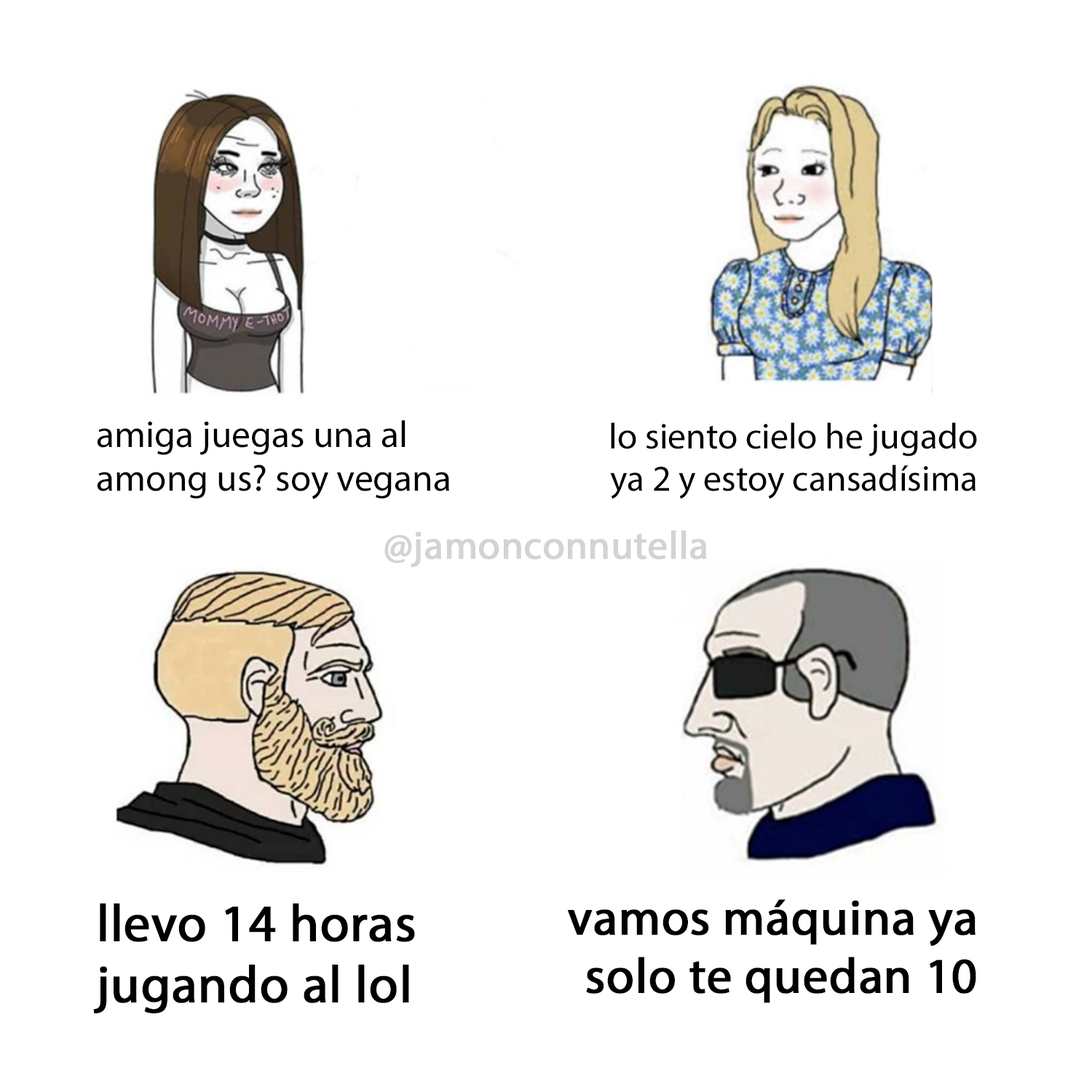
<style>
.page{position:relative;width:1092px;height:1092px;background:#ffffff}
.page>*{position:absolute;margin:0}
.t1{font:37.7px "MyriadPro-Regular";color:#000000}
.t2{font:36.3px "MyriadPro-Regular";color:#000000}
.t3{font:39.5px "MyriadPro-Regular";color:#d3d3d3;font-weight:bold}
.t4{font:52.4px "MyriadPro-Regular";color:#000000;font-weight:bold}
.t5{font:49.8px "MyriadPro-Regular";color:#000000;font-weight:bold}
</style>
<div class="page">
<p class="t1" style="left:97px;top:420px;width:352px;height:79px">amiga juegas una al<br>among us? soy vegana</p>
<p class="t2" style="left:610px;top:422px;width:367px;height:77px;text-align:right">lo siento cielo he jugado<br>ya 2 y estoy cansadísima</p>
<p class="t3" style="left:384px;top:530px;width:323px;height:37px">@jamonconnutella</p>
<p class="t4" style="left:93px;top:903px;width:322px;height:110px">llevo 14 horas <br>jugando al lol</p>
<p class="t5" style="left:568px;top:899px;width:408px;height:104px;text-align:right">vamos máquina ya<br>solo te quedan 10</p>
</div>
